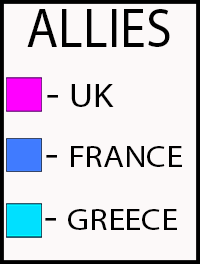
<style>
.page{position:relative;width:200px;height:264px;background:#fcf9f9}
.page>*{position:absolute;margin:0}
.t1{font:55px "MyriadPro-Regular";color:#000000;scale:0.95 1}
.t2{font:33.9px "MyriadPro-Regular";color:#000000;scale:1.1 1}
.t3{font:40px "MyriadPro-Regular";color:#000000;scale:1.1 1}
.t4{font:31.2px "MyriadPro-Regular";color:#000000;scale:1.1 1}
</style>
<div class="page">
<p class="t1" style="left:27px;top:9px;width:143px;height:38px">ALLIES</p>
<p class="t2" style="left:47px;top:84px;width:67px;height:23px"><span class="t3">- </span>UK</p>
<p class="t4" style="left:46px;top:146px;width:136px;height:21px"><span class="t3">- </span>FRANCE</p>
<p class="t4" style="left:45px;top:209px;width:132px;height:21px"><span class="t3">- </span>GREECE</p>
</div>
